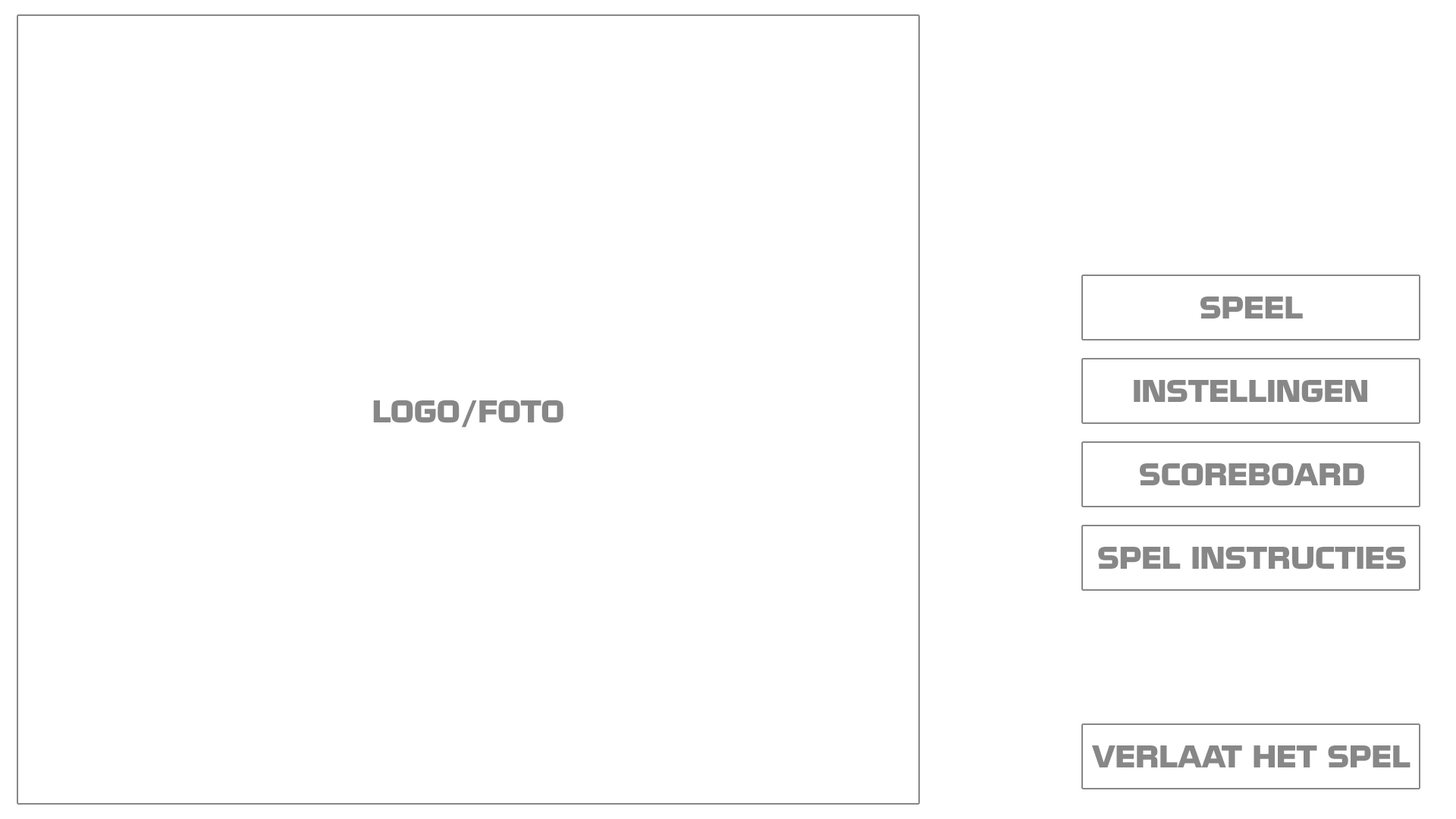
<style>
.page{position:relative;width:1456px;height:819px;background:#ffffff}
.page>*{position:absolute;margin:0}
.t1{font:27.3px "NissanOpti";color:#878787}
</style>
<div class="page">
<p class="t1" style="left:1200px;top:297px;width:103px;height:21px">SPEEL</p>
<p class="t1" style="left:1134px;top:380px;width:233px;height:23px">INSTELLINGEN</p>
<p class="t1" style="left:373px;top:400px;width:190px;height:28px">LOGO/FOTO</p>
<p class="t1" style="left:1140px;top:463px;width:224px;height:23px">SCOREBOARD</p>
<p class="t1" style="left:1098px;top:547px;width:308px;height:23px">SPEL INSTRUCTIES</p>
<p class="t1" style="left:1092px;top:745px;width:318px;height:22px">VERLAAT HET SPEL</p>
</div>
